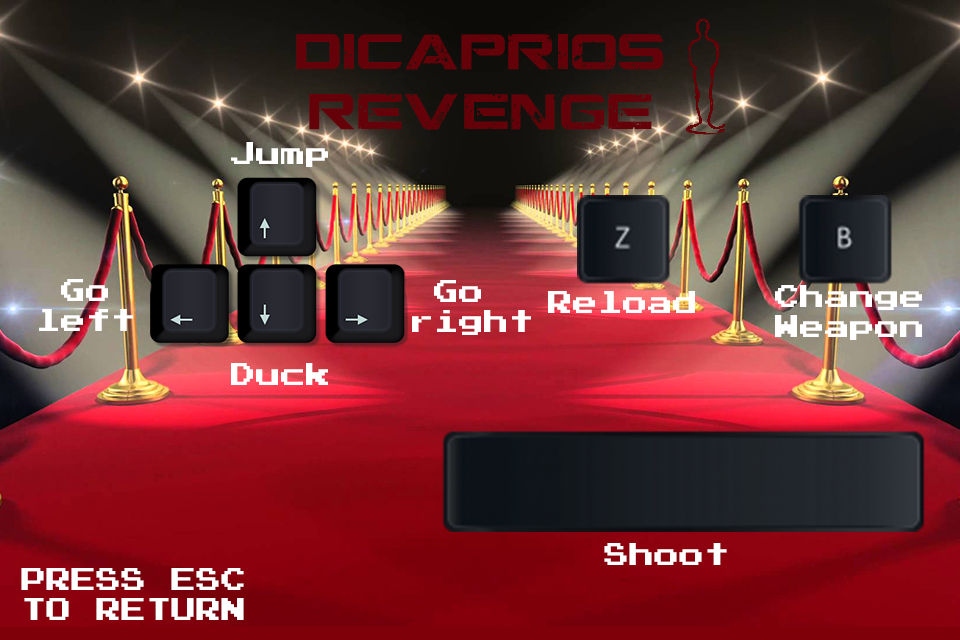
<style>
.page{position:relative;width:960px;height:640px}
.page>*{position:absolute;margin:0}
.t1{font:50px "CGFLocustResistance";color:#650108}
.t2{font:25px "PressStart2P";color:#ffffff}
</style>
<div class="page">
<p class="t1" style="left:296px;top:34px;width:367px;height:96px;text-align:center">DiCaprios<br>Revenge</p>
<p class="t2" style="left:231px;top:142px;width:97px;height:25px">Jump</p>
<p class="t2" style="left:39px;top:279px;width:94px;height:52px;text-align:center">Go<br>left</p>
<p class="t2" style="left:412px;top:280px;width:119px;height:55px;text-align:center">Go <br>right</p>
<p class="t2" style="left:548px;top:291px;width:147px;height:22px">Reload</p>
<p class="t2" style="left:775px;top:285px;width:147px;height:55px;text-align:center">Change<br>Weapon</p>
<p class="t2" style="left:231px;top:363px;width:97px;height:22px">Duck</p>
<p class="t2" style="left:604px;top:543px;width:123px;height:22px">Shoot</p>
<p class="t2" style="left:21px;top:568px;width:223px;height:52px;text-align:center">PRESS ESC<br>TO RETURN</p>
</div>
